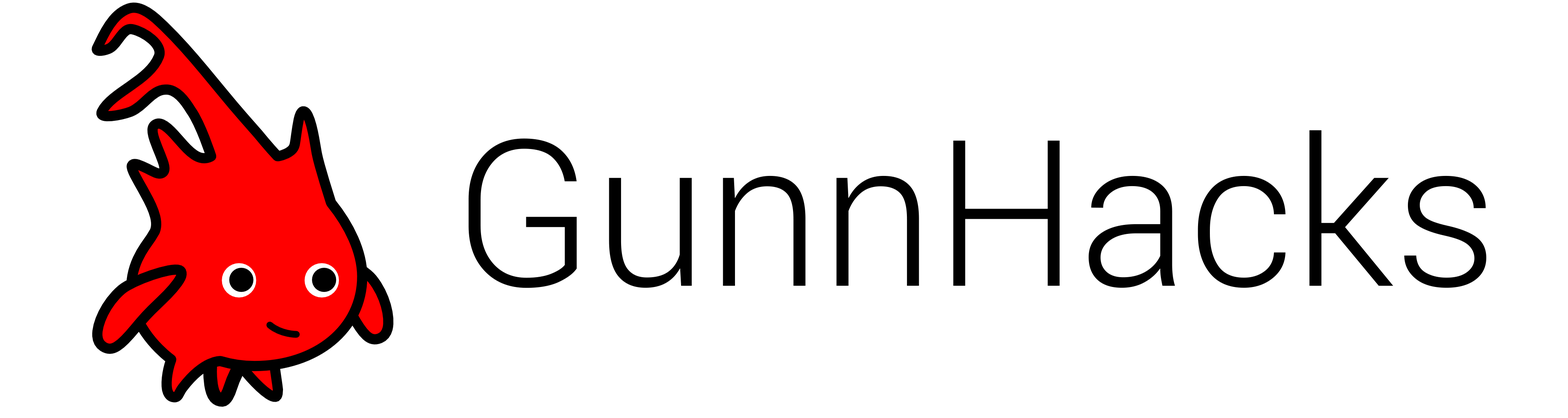
<style>
.page{position:relative;width:1568px;height:418px;background:#ffffff}
.page>*{position:absolute;margin:0}
.t1{font:204px "Roboto-Light";color:#000000}
</style>
<div class="page">
<p class="t1" style="left:468px;top:130px;width:1018px;height:158px">GunnHacks</p>
</div>
